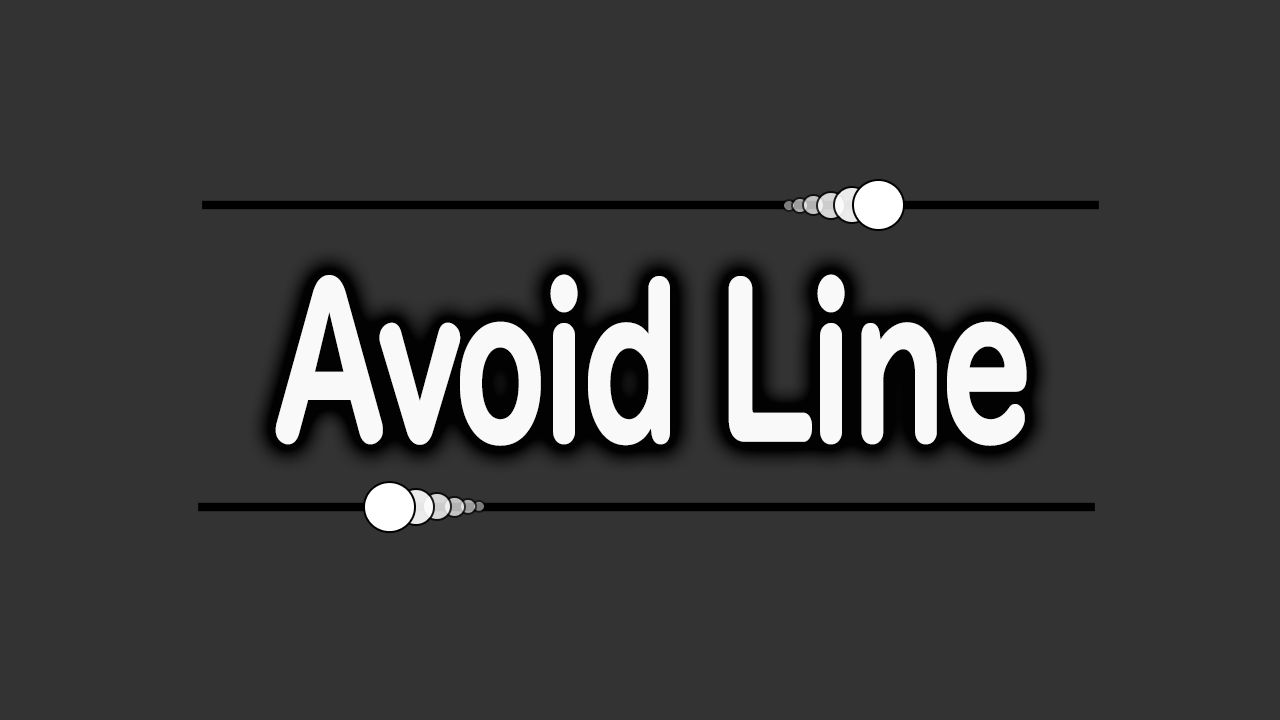
<style>
.page{position:relative;width:1280px;height:720px;background:#333333}
.page>*{position:absolute;margin:0}
.t1{font:53px "UDDigiKyokashoNK-B";letter-spacing:-0.07em;color:#ffffff;font-weight:bold;scale:0.69 1}
</style>
<div class="page">
<p class="t1" style="left:275px;top:274px;width:752px;height:172px;text-align:center;opacity:0.97">Avoid Line</p>
</div>
